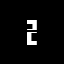
<style>
.page{position:relative;width:64px;height:64px;background:#000000}
.page>*{position:absolute;margin:0}
.t1{font:30px "SCIFIBOX";color:#ffffff}
</style>
<div class="page">
<p class="t1" style="left:27px;top:20px;width:10px;height:25px">2</p>
</div>
